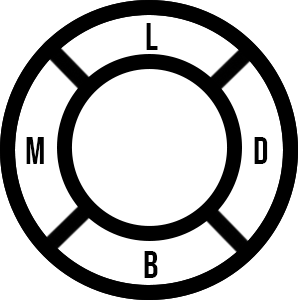
<style>
.page{position:relative;width:300px;height:300px;background:#ffffff}
.page>*{position:absolute;margin:0}
.t1{font:37.7px "BebasNeue-Regular";color:#000000}
</style>
<div class="page">
<p class="t1" style="left:146px;top:23px;width:12px;height:27px">l</p>
<p class="t1" style="left:26px;top:137px;width:18px;height:27px">m</p>
<p class="t1" style="left:254px;top:137px;width:14px;height:27px">d</p>
<p class="t1" style="left:144px;top:251px;width:14px;height:27px">b</p>
</div>
